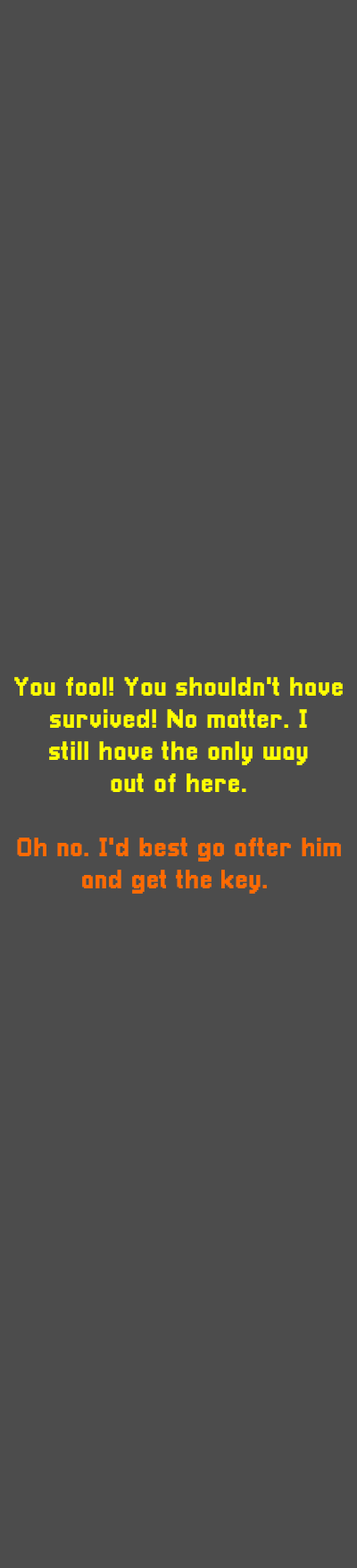
<style>
.page{position:relative;width:357px;height:1568px;background:#4c4c4c}
.page>*{position:absolute;margin:0}
.t1{font:26.8px "Pixellari";color:#ffff00}
.t2{font:26.8px "Pixellari";color:#ff6a00}
</style>
<div class="page">
<p class="t1" style="left:14px;top:677px;width:328px;height:217px;text-align:center">You fool! You shouldn't have<br>survived! No matter. I<br>still have the only way<br>out of here.<br><br><span class="t2">Oh no. I'd best go after him<br>and get the key.</span></p>
</div>
